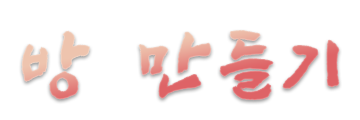
<style>
.page{position:relative;width:360px;height:120px;background:#ffffff}
.page>*{position:absolute;margin:0}
.t1{font:77.3px "SangSangRockOTF";letter-spacing:0.12em}
</style>
<div class="page">
<p class="t1" style="left:22px;top:31px;width:317px;height:69px">방 만들기</p>
</div>
